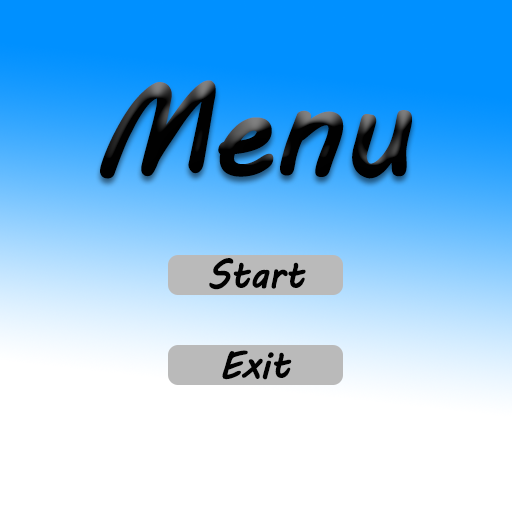
<style>
.page{position:relative;width:512px;height:512px;background:#ffffff}
.page>*{position:absolute;margin:0}
.t1{font:125px "MVBoli";letter-spacing:-0.025em;color:#010101;font-weight:bold}
.t2{font:37.8px "MVBoli";letter-spacing:-0.025em;color:#010101;font-weight:bold}
</style>
<div class="page">
<p class="t1" style="left:100px;top:80px;width:312px;height:99px">Menu</p>
<p class="t2" style="left:209px;top:258px;width:97px;height:32px">Start</p>
<p class="t2" style="left:222px;top:350px;width:70px;height:30px">Exit</p>
</div>
